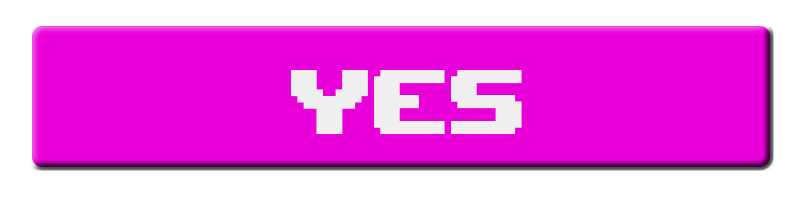
<style>
.page{position:relative;width:800px;height:200px;background:#e900d9}
.page>*{position:absolute;margin:0}
.t1{font:128px "UpheavalTT-BRK-";color:#efefef}
</style>
<div class="page">
<p class="t1" style="left:291px;top:70px;width:231px;height:64px">YES</p>
</div>
